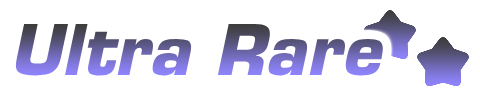
<style>
.page{position:relative;width:480px;height:100px;background:#ffffff}
.page>*{position:absolute;margin:0}
.t1{font:68px "Eurostile-BoldOblique"}
</style>
<div class="page">
<p class="t1" style="left:15px;top:23px;width:368px;height:53px">Ultra Rare</p>
</div>
